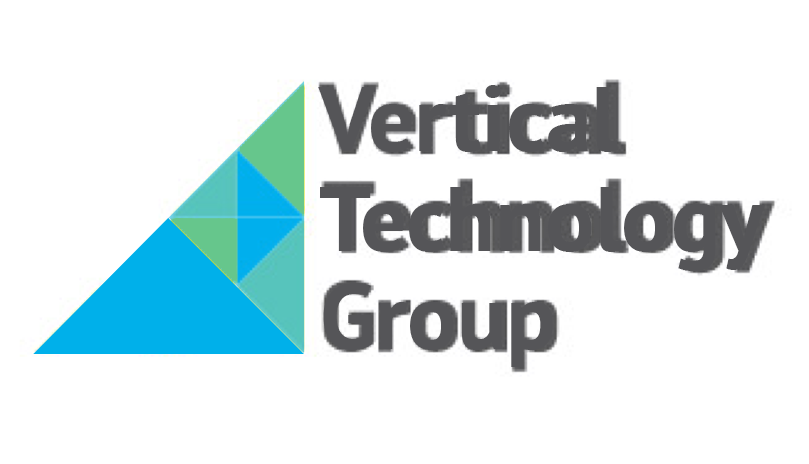
<style>
.page{position:relative;width:809px;height:464px;background:#ffffff}
.page>*{position:absolute;margin:0}
.t1{font:91.7px "PTSans-Bold";color:#555558}
.t2{font:91.7px "PTSans-Bold";letter-spacing:0.175em;color:#555558}
</style>
<div class="page">
<p class="t1" style="left:318px;top:85px;width:301px;height:67px">Vertica<span class="t2">l</span></p>
<p class="t1" style="left:320px;top:187px;width:445px;height:84px">Technology</p>
<p class="t1" style="left:323px;top:283px;width:230px;height:84px">Group</p>
</div>
